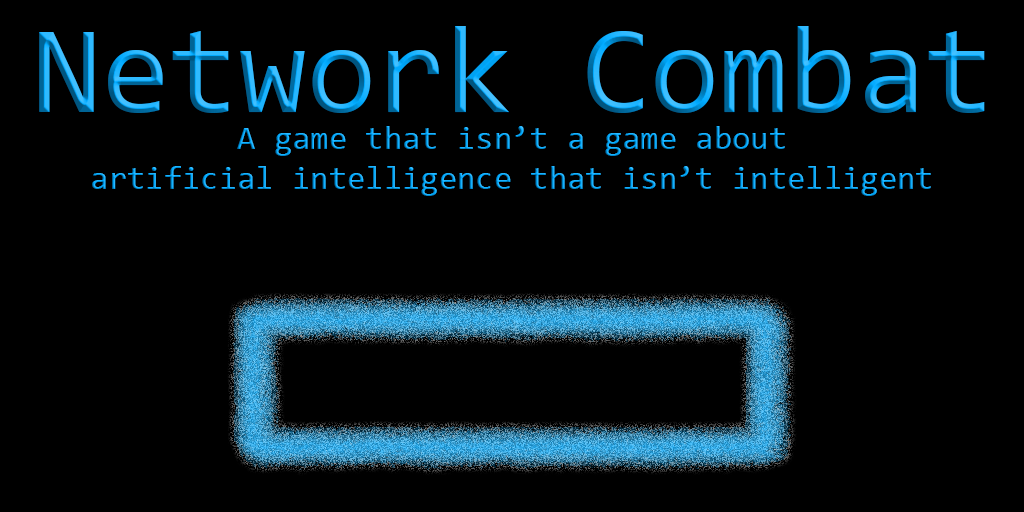
<style>
.page{position:relative;width:1024px;height:512px;background:#000000}
.page>*{position:absolute;margin:0}
.t1{font:125px "Consolas"}
.t2{font:33.3px "Consolas"}
</style>
<div class="page">
<p class="t1" style="left:39px;top:26px;width:946px;height:87px">Network Combat</p>
<p class="t2" style="left:92px;top:126px;width:839px;height:70px;text-align:center">A game that isn’t a game about<br>artificial intelligence that isn’t intelligent</p>
</div>
